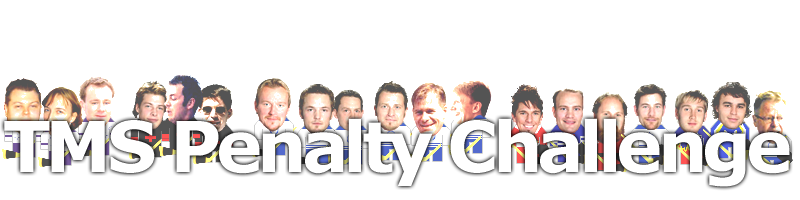
<style>
.page{position:relative;width:800px;height:200px;background:#ffffff}
.page>*{position:absolute;margin:0}
.t1{font:70px "Verdana-Bold";letter-spacing:-0.075em;color:#ffffff}
</style>
<div class="page">
<p class="t1" style="left:4px;top:118px;width:786px;height:69px">TMS Penalty Challenge</p>
</div>
